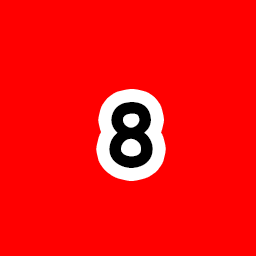
<style>
.page{position:relative;width:256px;height:256px;background:#ff0000}
.page>*{position:absolute;margin:0}
.t1{font:90px "ComicHelvetic-Medium";color:#000000}
</style>
<div class="page">
<p class="t1" style="left:109px;top:102px;width:44px;height:66px">8</p>
</div>
